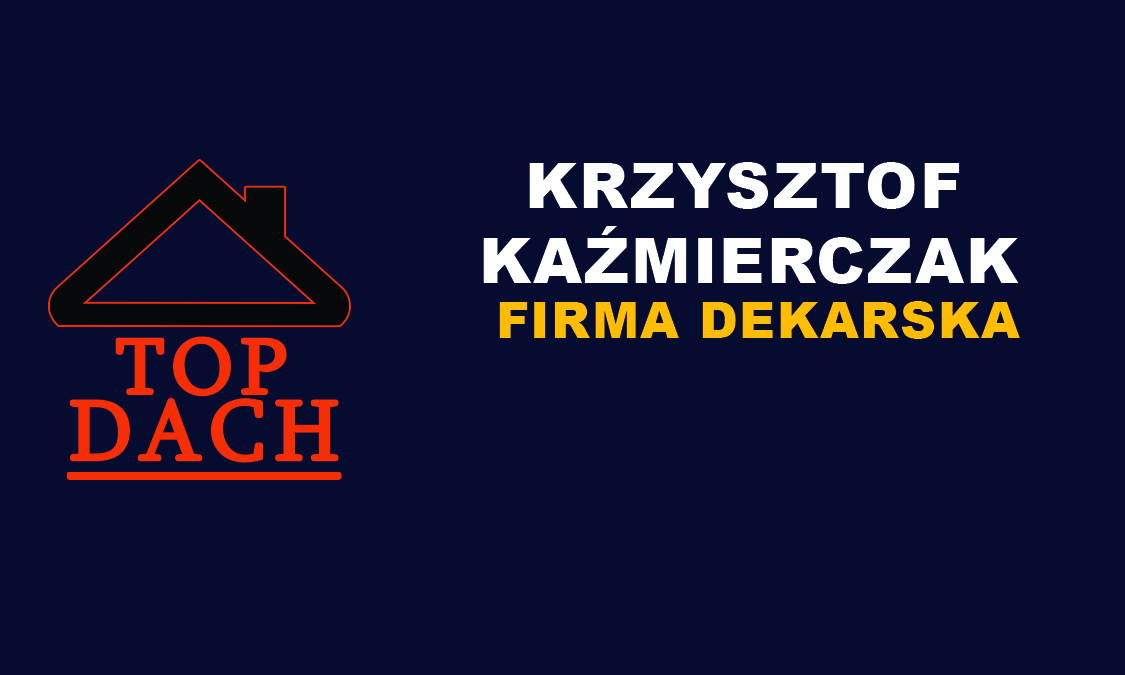
<style>
.page{position:relative;width:1125px;height:675px;background:#060b30}
.page>*{position:absolute;margin:0}
.t1{font:63.1px/75px "Arial-Black";letter-spacing:0.029em;color:#ffffff}
.t2{font:50px "Arial-Black";letter-spacing:0.029em;color:#febd00}
.t3{font:63.1px "Arial-Black";letter-spacing:0.029em;color:#ffffff}
</style>
<div class="page">
<p class="t1" style="left:483px;top:162px;width:536px;height:122px">KRZYSZTOF <br>KAŹMIERCZAK</p>
<p class="t2" style="left:499px;top:301px;width:521px;height:38px"><span class="t3">  </span>FIRMA DEKARSKA</p>
</div>
